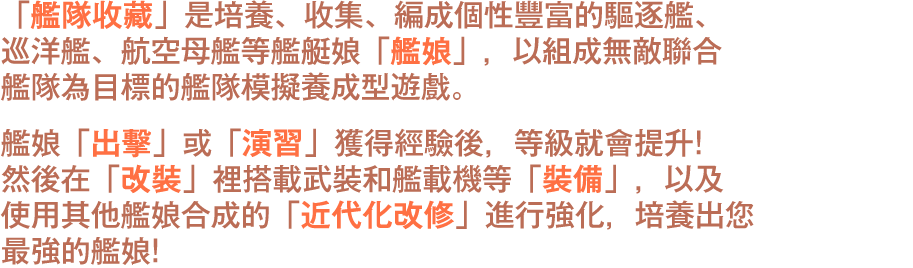
<style>
.page{position:relative;width:913px;height:268px;background:#ffffff}
.page>*{position:absolute;margin:0}
.t1{font:30px/36px "GothicMB101Pr6N-Medium";color:#bb6d56}
.t2{font:30px/36px "GothicMB101Pr6N-Medium";color:#ff7043;font-weight:bold}
.t3{font:30px/28px "GothicMB101Pr6N-Medium";color:#bb6d56}
</style>
<div class="page">
<p class="t1" style="left:0px;top:0px;width:754px;height:265px">「<span class="t2">艦隊收藏</span>」是培養、收集、編成個性豐富的驅逐艦、<br>巡洋艦、航空母艦等艦艇娘「<span class="t2">艦娘</span>」，以組成無敵聯合<br><span class="t3">艦隊為目標的艦隊模擬養成型遊戲。<br><br></span>艦娘「<span class="t2">出擊</span>」或「<span class="t2">演習</span>」獲得經驗後，等級就會提升!<br>然後在「<span class="t2">改裝</span>」裡搭載武裝和艦載機等「<span class="t2">裝備</span>」，以及<br>使用其他艦娘合成的「<span class="t2">近代化改修</span>」進行強化，培養出您<br>最強的艦娘!</p>
</div>
